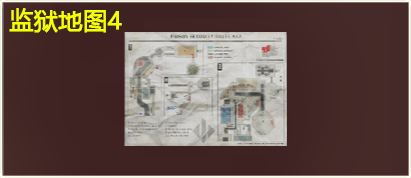
<style>
.page{position:relative;width:411px;height:178px}
.page>*{position:absolute;margin:0}
.t1{font:24px "MicrosoftYaHeiUI";color:#f4ff00;font-weight:bold}
</style>
<div class="page">
<p class="t1" style="left:9px;top:8px;width:113px;height:25px">监狱地图4</p>
</div>
